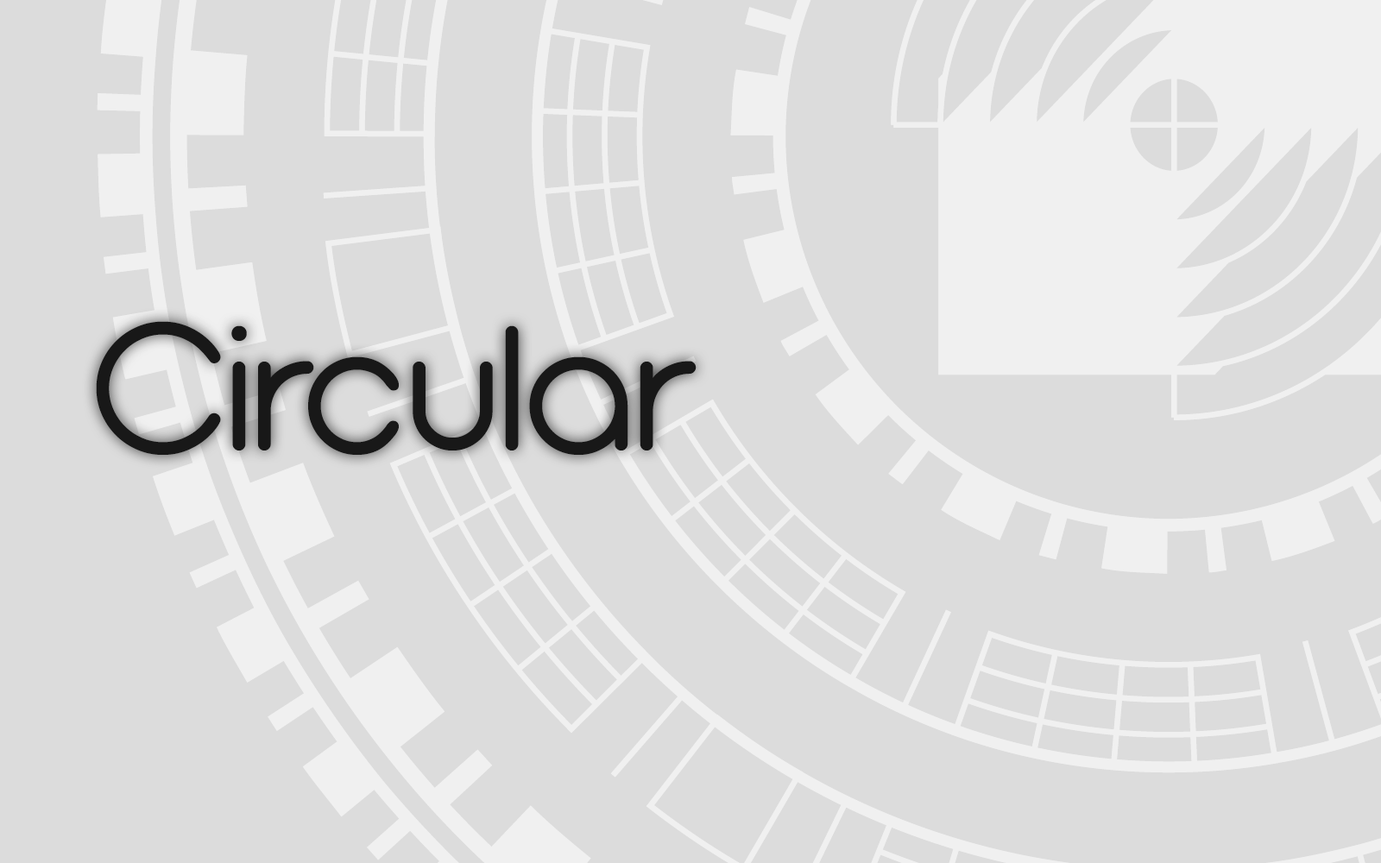
<style>
.page{position:relative;width:1381px;height:863px;background:#dcdcdc}
.page>*{position:absolute;margin:0}
.t1{font:177.8px "Opificio-Rounded";color:#181818}
</style>
<div class="page">
<p class="t1" style="left:96px;top:321px;width:601px;height:134px">Circular</p>
</div>
